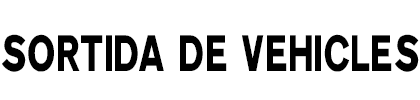
<style>
.page{position:relative;width:420px;height:100px;background:#ffffff}
.page>*{position:absolute;margin:0}
.t1{font:50.3px "Ccrige-Regular";color:#000000;scale:0.75 1}
</style>
<div class="page">
<p class="t1" style="left:2px;top:34px;width:417px;height:38px">SORTIDA DE VEHICLES</p>
</div>
